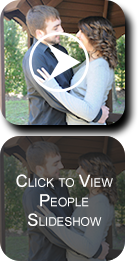
<style>
.page{position:relative;width:139px;height:271px}
.page>*{position:absolute;margin:0}
.t1{font:16.7px/19.4px "ArialMT";color:#ffffff;font-variant:small-caps}
</style>
<div class="page">
<p class="t1" style="left:16px;top:174px;width:97px;height:52px;text-align:center">Click to View People<br>Slideshow</p>
</div>
